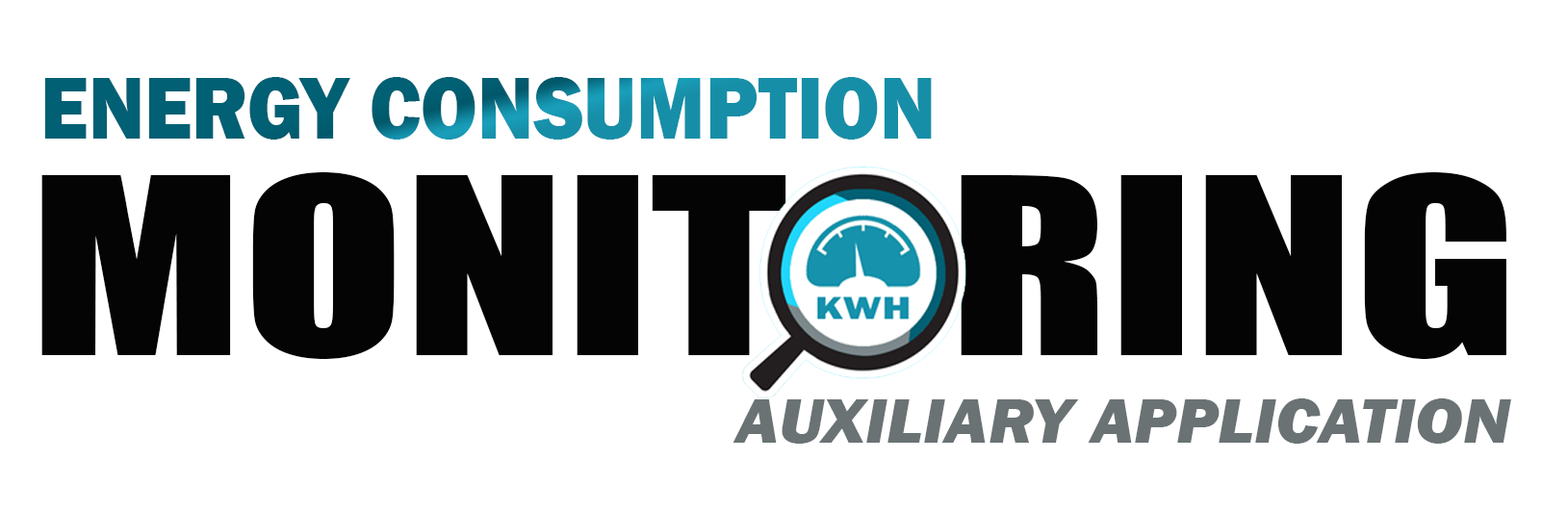
<style>
.page{position:relative;width:1568px;height:511px;background:#ffffff}
.page>*{position:absolute;margin:0}
.t1{font:91.2px "FranklinGothic-Heavy";scale:0.9 1}
.t2{font:226.9px "Impact";color:#040404;scale:1.31 1}
.t3{font:65.3px "FranklinGothic-HeavyItalic";color:#6a7274;scale:1.07 1}
</style>
<div class="page">
<p class="t1" style="left:44px;top:77px;width:888px;height:63px">ENERGY CONSUMPTION</p>
<p class="t2" style="left:41px;top:171px;width:1465px;height:188px">MONITORING</p>
<p class="t3" style="left:733px;top:398px;width:778px;height:46px">AUXILIARY APPLICATION</p>
</div>
